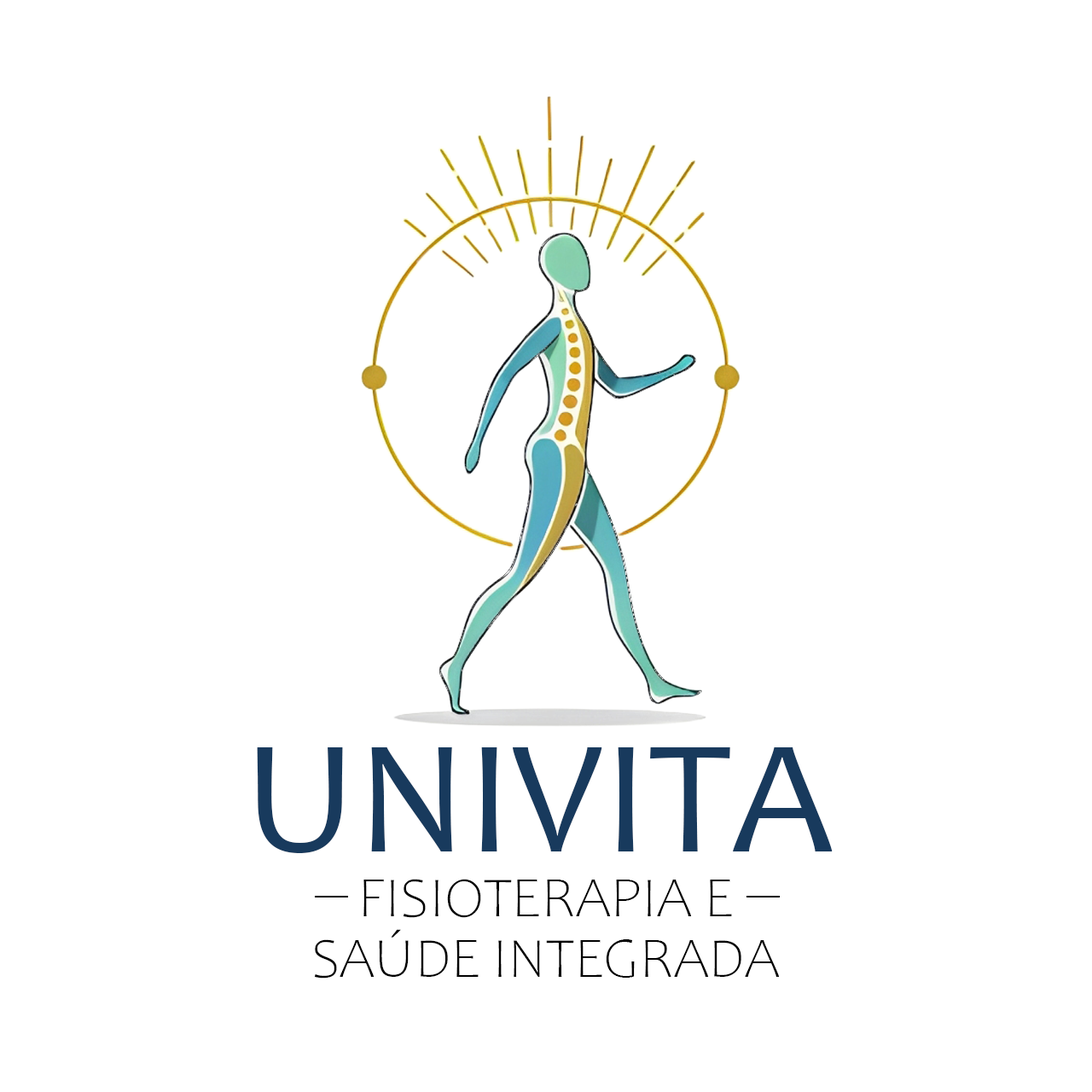
<style>
.page{position:relative;width:1092px;height:1092px;background:#ffffff}
.page>*{position:absolute;margin:0}
.t1{font:164px "Candara";color:#183a5d}
.t2{font:56.9px/60.6px "Candara-Light";color:#000000}
</style>
<div class="page">
<p class="t1" style="left:257px;top:747px;width:576px;height:106px">UNIVITA</p>
<p class="t2" style="left:315px;top:879px;width:465px;height:100px;text-align:center">FISIOTERAPIA E<br>SAÚDE INTEGRADA</p>
</div>
